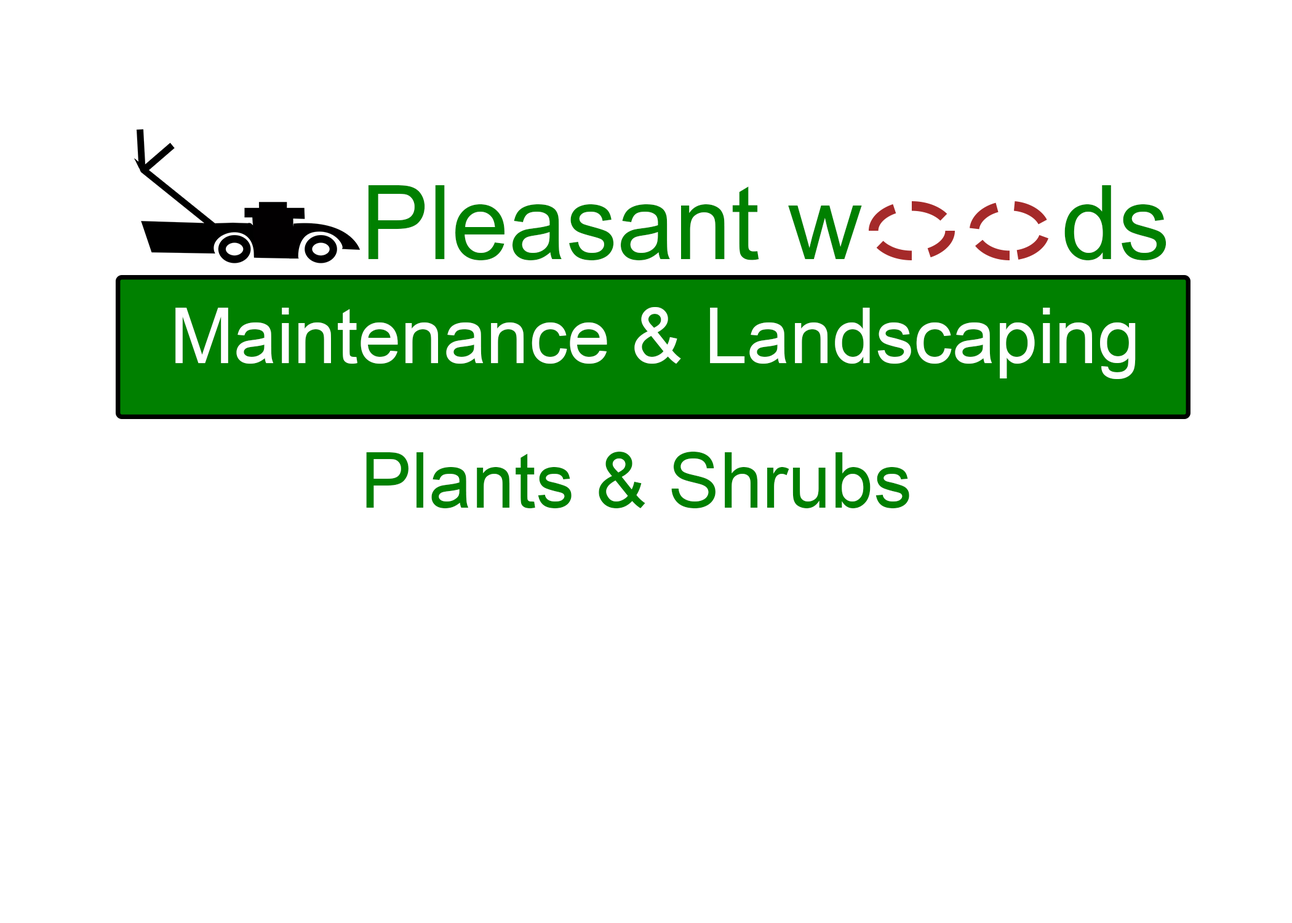
<style>
.page{position:relative;width:1292px;height:923px;background:#ffffff}
.page>*{position:absolute;margin:0}
.t1{font:102.5px "ArialMT";color:#008000}
.t2{font:76.9px "ArialMT";color:#ffffff}
.t3{font:76.9px "ArialMT";color:#008000}
</style>
<div class="page">
<p class="t1" style="left:368px;top:185px;width:799px;height:75px">Pleasant w       ds</p>
<p class="t2" style="left:175px;top:307px;width:961px;height:72px">Maintenance &amp; Landscaping</p>
<p class="t3" style="left:366px;top:452px;width:543px;height:56px">Plants &amp; Shrubs</p>
</div>
